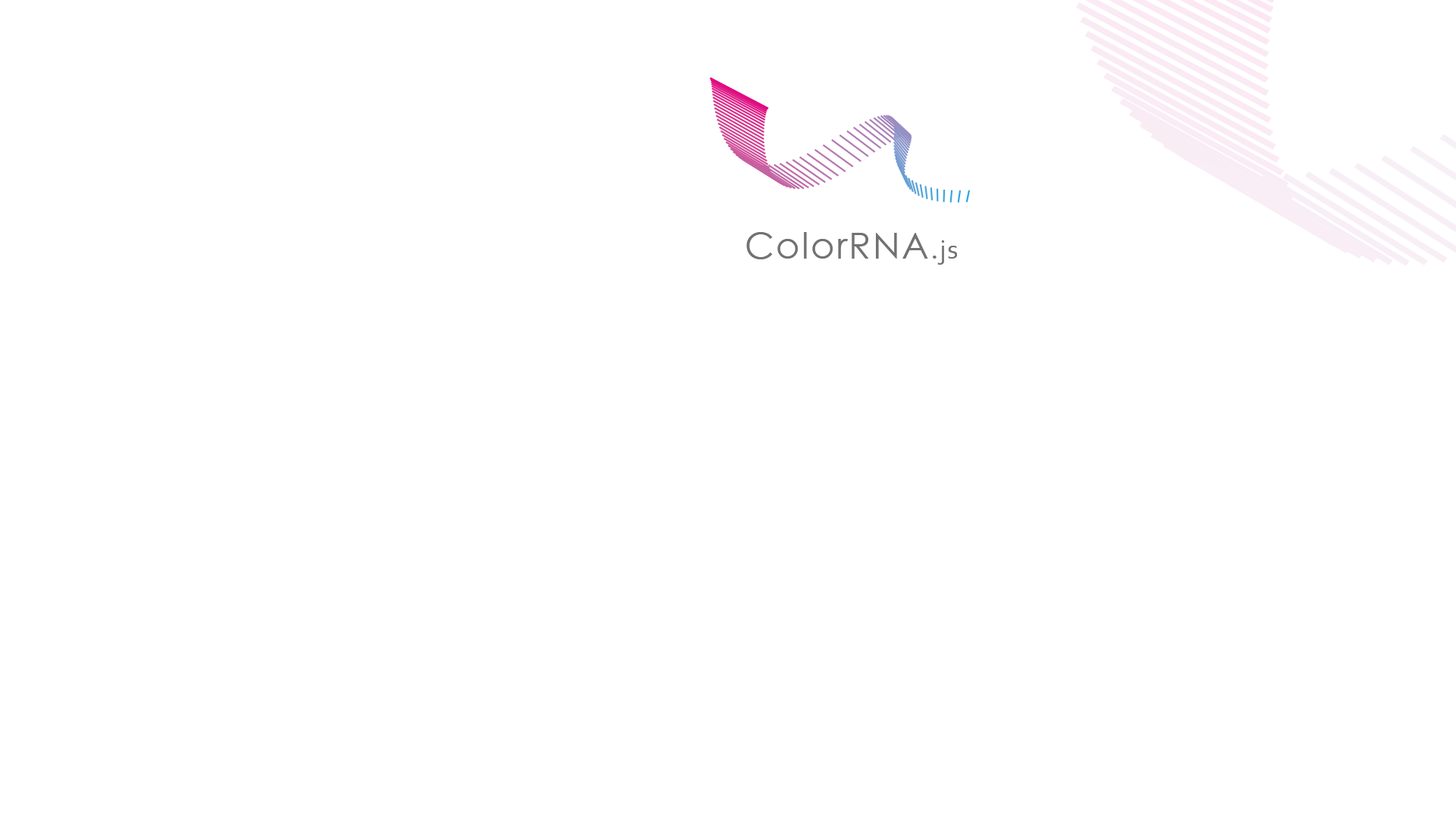
<style>
.page{position:relative;width:1456px;height:819px;background:#ffffff}
.page>*{position:absolute;margin:0}
.t1{font:36.4px "CenturyGothic";letter-spacing:0.05em;color:#727272}
.t2{font:27.3px "CenturyGothic";letter-spacing:0.05em;color:#727272}
.t3{font:27.3px "Corbel";letter-spacing:0.05em;color:#727272}
</style>
<div class="page">
<p class="t1" style="left:746px;top:232px;width:211px;height:33px">ColorRNA<span class="t2">.</span><span class="t3">js</span></p>
</div>
